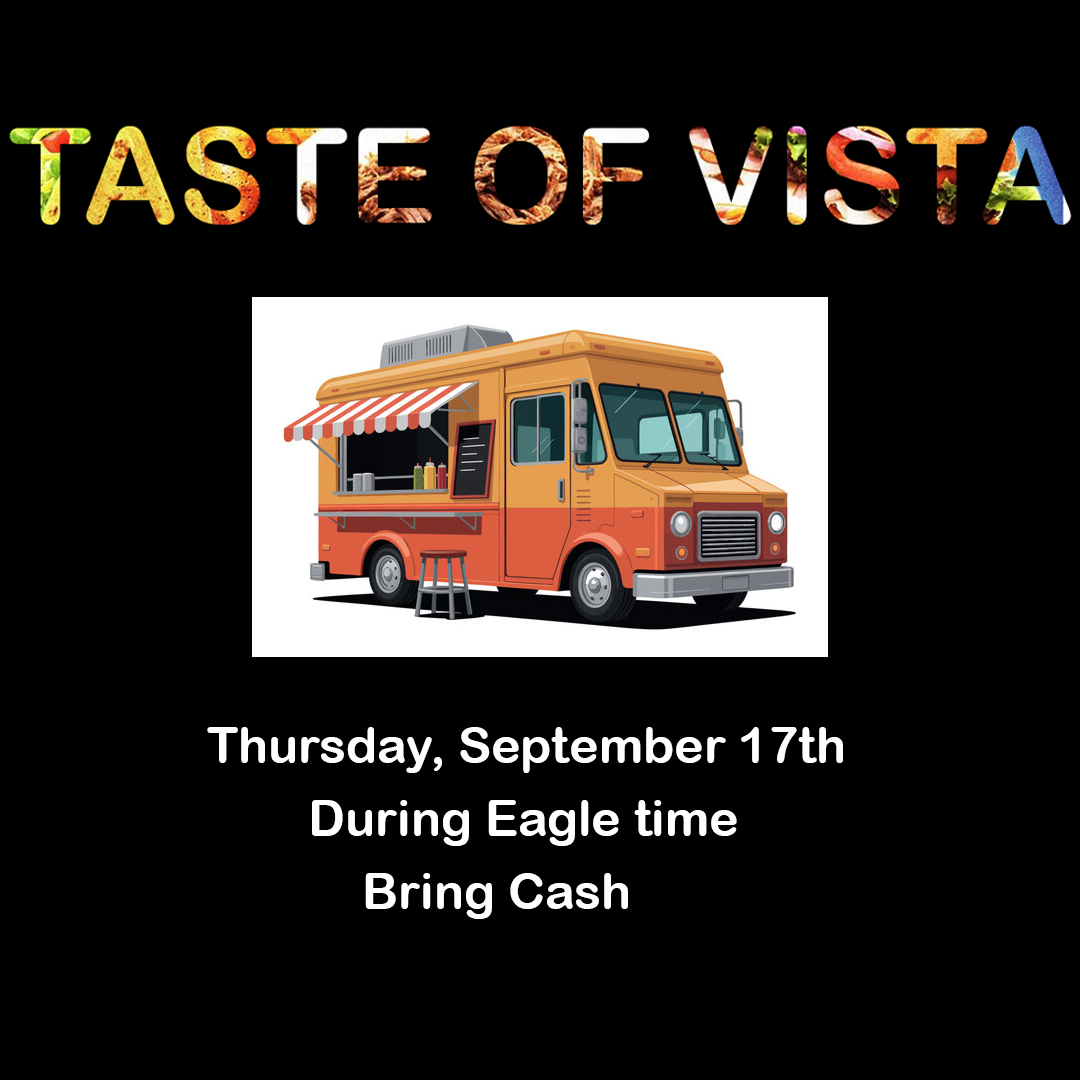
<style>
.page{position:relative;width:1080px;height:1080px;background:#000000}
.page>*{position:absolute;margin:0}
.t1{font:50px "ArialRoundedMTBold";color:#ffffff}
</style>
<div class="page">
<p class="t1" style="left:207px;top:727px;width:636px;height:46px">Thursday, September 17th</p>
<p class="t1" style="left:312px;top:800px;width:425px;height:46px">During Eagle time</p>
<p class="t1" style="left:365px;top:873px;width:263px;height:46px">Bring Cash</p>
</div>
